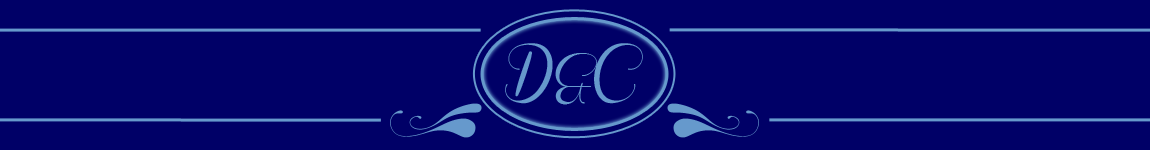
<style>
.page{position:relative;width:1150px;height:150px;background:#000067}
.page>*{position:absolute;margin:0}
.t1{font:60px "ConeriaScriptDemo";color:#6699cc}
</style>
<div class="page">
<p class="t1" style="left:505px;top:43px;width:138px;height:62px">D&amp;C</p>
</div>
